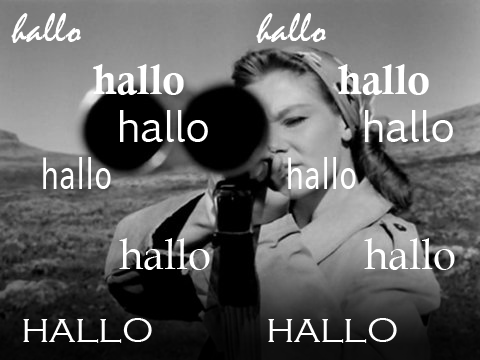
<style>
.page{position:relative;width:480px;height:360px}
.page>*{position:absolute;margin:0}
.t1{font:41.7px "Mistral";color:#ffffff}
.t2{font:41.7px "CalisMTBol";color:#ffffff}
.t3{font:41.7px "CopperplateGothic-Light";color:#ffffff}
.t4{font:41.7px "EuphemiaUCAS";color:#ffffff}
.t5{font:41.7px "AvenirNextCondensed-Regular";color:#ffffff}
.t6{font:41.7px "BookAntiqua";color:#ffffff}
</style>
<div class="page">
<p class="t1" style="left:11px;top:13px;width:70px;height:30px">hallo</p>
<p class="t1" style="left:256px;top:13px;width:70px;height:30px">hallo</p>
<p class="t2" style="left:93px;top:64px;width:91px;height:31px"><span class="t3"> </span>hallo</p>
<p class="t2" style="left:338px;top:64px;width:91px;height:31px"><span class="t3"> </span>hallo</p>
<p class="t4" style="left:120px;top:110px;width:88px;height:32px">hallo</p>
<p class="t4" style="left:365px;top:110px;width:88px;height:32px">hallo</p>
<p class="t5" style="left:43px;top:157px;width:68px;height:32px">hallo</p>
<p class="t5" style="left:288px;top:157px;width:68px;height:32px">hallo</p>
<p class="t6" style="left:119px;top:238px;width:91px;height:32px">hallo</p>
<p class="t6" style="left:364px;top:238px;width:91px;height:32px">hallo</p>
<p class="t3" style="left:23px;top:318px;width:129px;height:25px">hallo</p>
<p class="t3" style="left:268px;top:318px;width:129px;height:25px">hallo</p>
</div>
